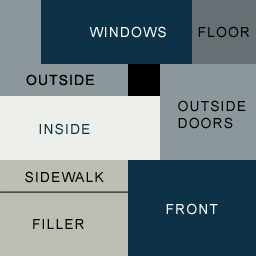
<style>
.page{position:relative;width:256px;height:256px;background:#0d3146}
.page>*{position:absolute;margin:0}
.t1{font:14px "ArialMT";letter-spacing:0.075em;color:#ffffff}
.t2{font:14px "ArialMT";letter-spacing:0.075em;color:#000000}
.t3{font:14px "ArialMT";letter-spacing:0.075em;color:#0d3146}
</style>
<div class="page">
<p class="t1" style="left:89px;top:26px;width:77px;height:12px">WINDOWS</p>
<p class="t2" style="left:198px;top:26px;width:51px;height:12px">FLOOR</p>
<p class="t2" style="left:26px;top:74px;width:68px;height:12px">OUTSIDE</p>
<p class="t2" style="left:178px;top:100px;width:68px;height:29px">OUTSIDE<br>DOORS</p>
<p class="t3" style="left:39px;top:123px;width:51px;height:12px">INSIDE</p>
<p class="t2" style="left:25px;top:171px;width:79px;height:12px">SIDEWALK</p>
<p class="t1" style="left:166px;top:203px;width:52px;height:12px">FRONT</p>
<p class="t2" style="left:33px;top:219px;width:51px;height:10px">FILLER</p>
</div>
